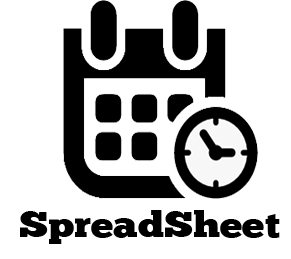
<style>
.page{position:relative;width:291px;height:259px;background:#ffffff}
.page>*{position:absolute;margin:0}
.t1{font:35.6px "ChunkFiveEx";color:#010000;scale:1.15 1}
</style>
<div class="page">
<p class="t1" style="left:20px;top:210px;width:260px;height:34px">SpreadSheet</p>
</div>
